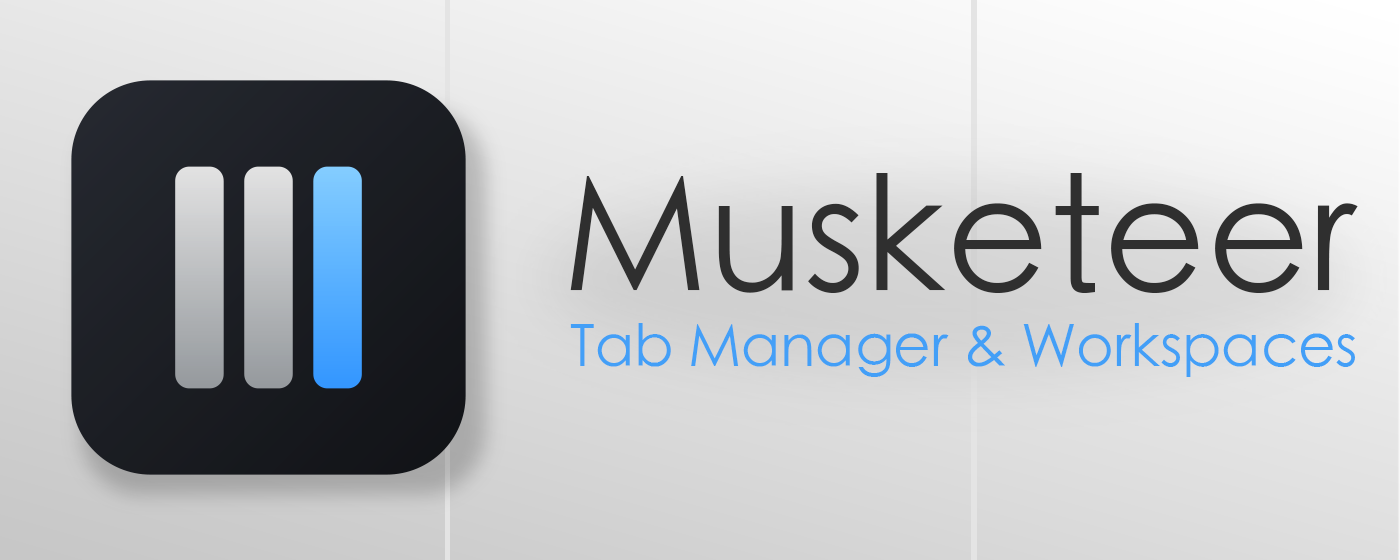
<style>
.page{position:relative;width:1400px;height:560px}
.page>*{position:absolute;margin:0}
.t1{font:159.1px "STHeitiSC-Light";color:#2f2f2f}
.t2{font:57.6px "STHeitiSC-Light";color:#439ff7}
</style>
<div class="page">
<p class="t1" style="left:570px;top:173px;width:788px;height:120px">Musketeer</p>
<p class="t2" style="left:570px;top:323px;width:785px;height:54px">Tab Manager &amp; Workspaces</p>
</div>
